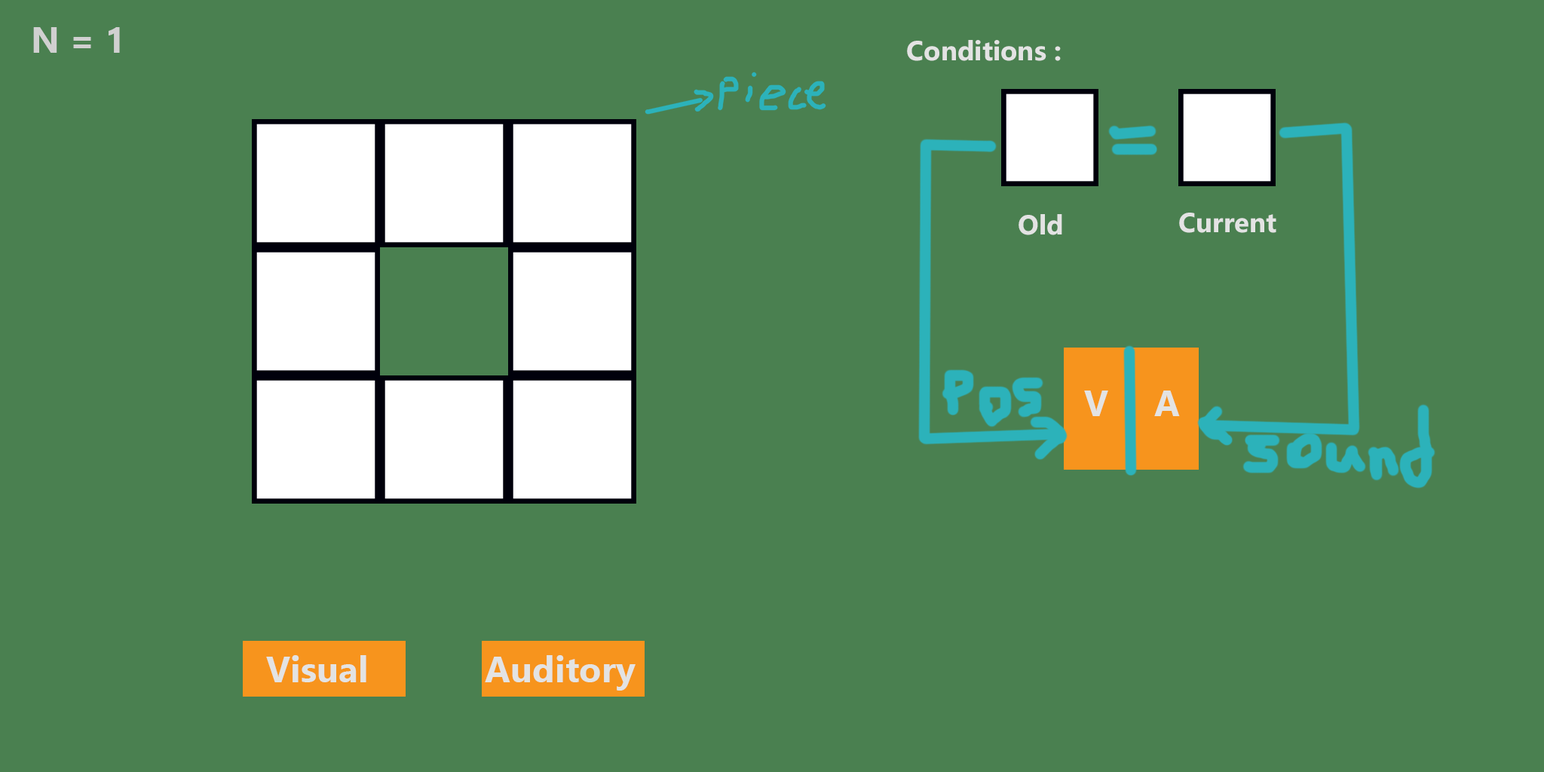
<style>
.page{position:relative;width:1544px;height:772px;background:#4a8050}
.page>*{position:absolute;margin:0}
.t1{font:36.2px "Ebrima-Bold";color:#d0d0d0}
.t2{font:27.5px "Ebrima-Bold";color:#e3e3e3}
.t3{font:36.2px "Ebrima-Bold";color:#e3e3e3}
</style>
<div class="page">
<p class="t1" style="left:33px;top:27px;width:87px;height:26px">N = 1</p>
<p class="t2" style="left:907px;top:40px;width:154px;height:21px">Conditions :</p>
<p class="t2" style="left:1019px;top:214px;width:43px;height:21px">Old</p>
<p class="t2" style="left:1179px;top:213px;width:98px;height:20px">Current</p>
<p class="t3" style="left:1084px;top:391px;width:24px;height:25px">V</p>
<p class="t3" style="left:1154px;top:391px;width:26px;height:25px">A</p>
<p class="t3" style="left:266px;top:655px;width:100px;height:27px">Visual</p>
<p class="t3" style="left:485px;top:655px;width:151px;height:36px">Auditory</p>
</div>
